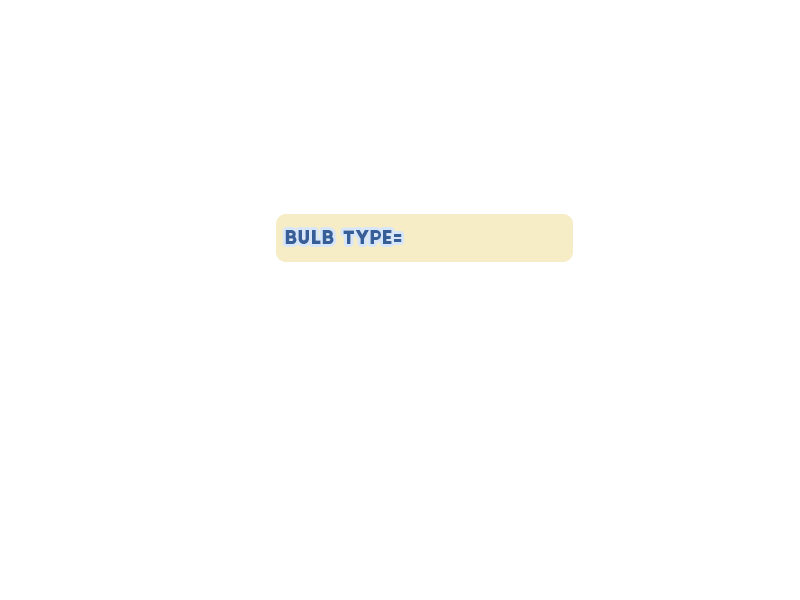
<style>
.page{position:relative;width:800px;height:600px;background:#ffffff}
.page>*{position:absolute;margin:0}
.t1{font:18px "BigJohn";color:#375e97}
</style>
<div class="page">
<p class="t1" style="left:285px;top:230px;width:117px;height:14px">Bulb Type=</p>
</div>
